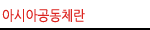
<style>
.page{position:relative;width:150px;height:30px;background:#ffffff}
.page>*{position:absolute;margin:0}
.t1{font:14px "NanumGothic";color:#dc241f;scale:0.9 1}
</style>
<div class="page">
<p class="t1" style="left:2px;top:9px;width:83px;height:14px">아시아공동체란</p>
</div>
